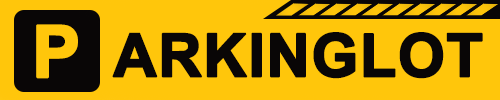
<style>
.page{position:relative;width:500px;height:100px;background:#ffc60b}
.page>*{position:absolute;margin:0}
.t1{font:72px "Arial-BoldMT";color:#ffc60b;font-weight:bold}
.t2{font:60px "Arial-BoldMT";color:#090606;font-weight:bold}
</style>
<div class="page">
<p class="t1" style="left:36px;top:24px;width:42px;height:55px">P</p>
<p class="t2" style="left:112px;top:32px;width:371px;height:47px">ARKINGLOT</p>
</div>
